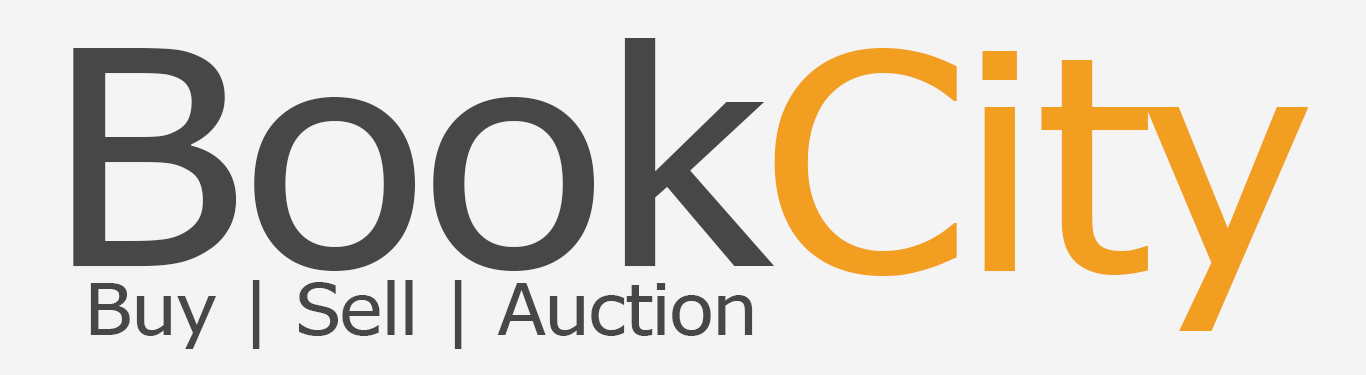
<style>
.page{position:relative;width:1366px;height:375px;background:#f4f4f4}
.page>*{position:absolute;margin:0}
.t1{font:300px "Tahoma";color:#474747;scale:1.1 1}
.t2{font:300px "Tahoma";color:#f29e20;scale:1.1 1}
.t3{font:72px "Tahoma";color:#474747;scale:1.1 1}
</style>
<div class="page">
<p class="t1" style="left:73px;top:38px;width:702px;height:233px">Book</p>
<p class="t2" style="left:774px;top:48px;width:535px;height:283px">City</p>
<p class="t3" style="left:90px;top:280px;width:663px;height:69px">Buy | Sell | Auction</p>
</div>
